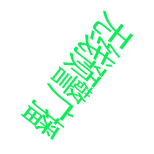
<style>
.page{position:relative;width:154px;height:154px;background:#ffffff}
.page>*{position:absolute;margin:0}
.t1{font:43.8px "MicrosoftYaHei";color:#0eec57;scale:0.52 1}
</style>
<div class="page">
<p class="t1" style="left:20px;top:10px;width:114px;height:130px;rotate:128deg">无线预警广播</p>
</div>
